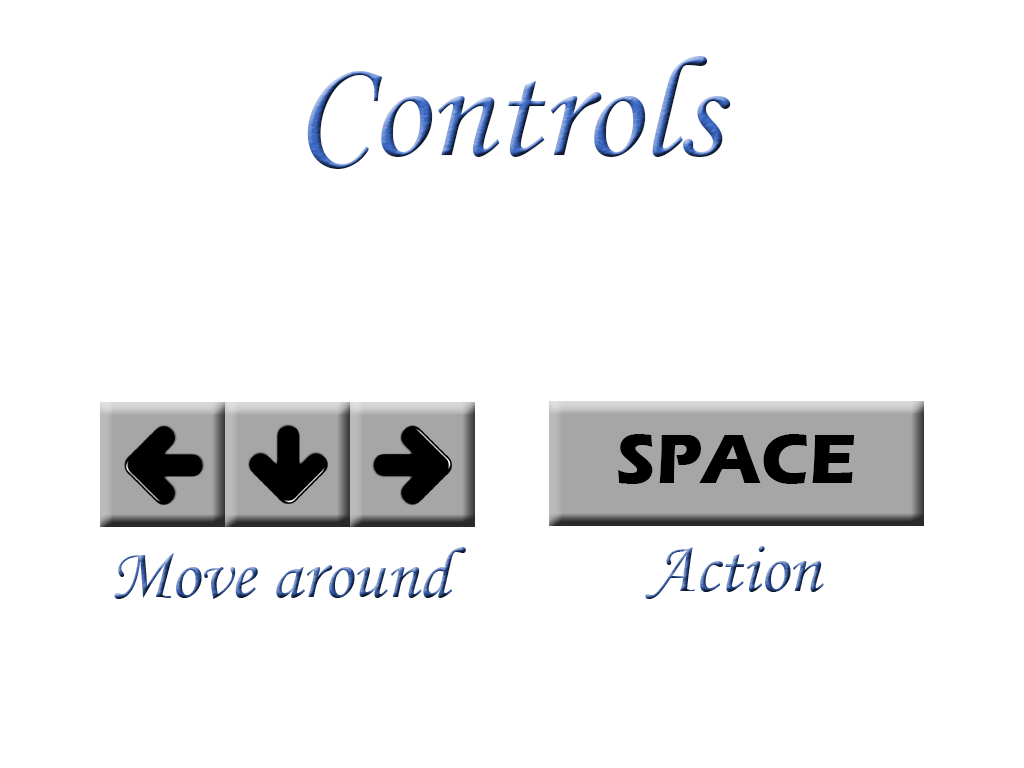
<style>
.page{position:relative;width:1024px;height:768px;background:#ffffff}
.page>*{position:absolute;margin:0}
.t1{font:144px "MonotypeCorsiva"}
.t2{font:72px "ErasITC-Bold";color:#000000}
.t3{font:72.1px "MonotypeCorsiva"}
</style>
<div class="page">
<p class="t1" style="left:307px;top:56px;width:424px;height:113px">Controls</p>
<p class="t2" style="left:618px;top:434px;width:237px;height:50px">SPACE</p>
<p class="t3" style="left:114px;top:547px;width:352px;height:52px">Move around</p>
<p class="t3" style="left:645px;top:546px;width:179px;height:53px">Action</p>
</div>
